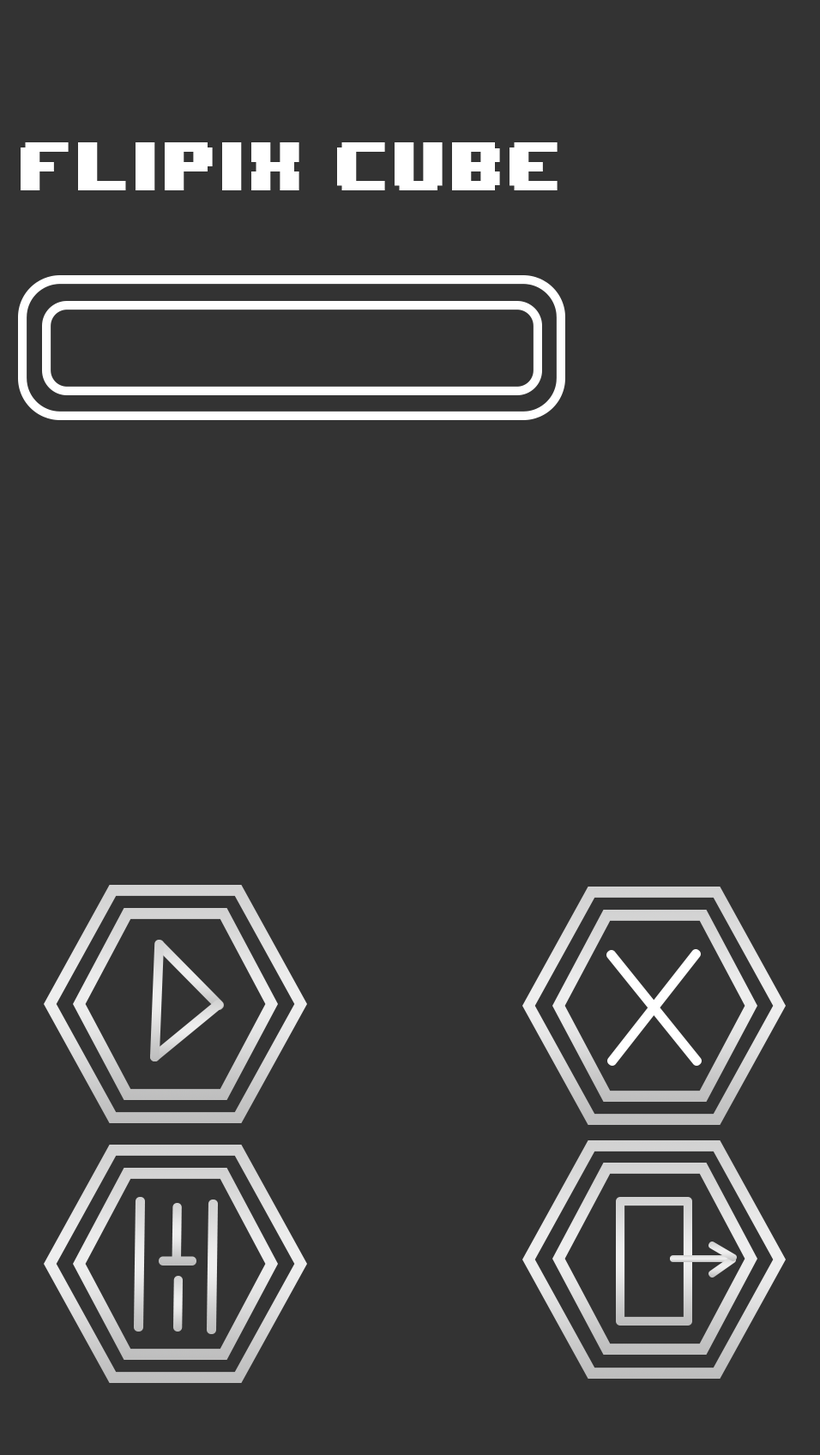
<style>
.page{position:relative;width:820px;height:1455px;background:#333333}
.page>*{position:absolute;margin:0}
.t1{font:57.2px "8BITWONDERRUSBYLYAJKA-Nominal";letter-spacing:0.005em;color:#ffffff;text-transform:uppercase}
</style>
<div class="page">
<p class="t1" style="left:21px;top:142px;width:536px;height:48px">Flipix Cube</p>
</div>
